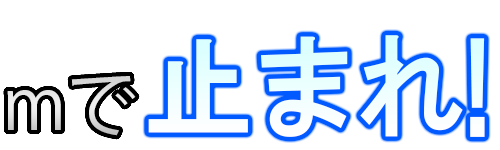
<style>
.page{position:relative;width:500px;height:150px;background:#ffffff}
.page>*{position:absolute;margin:0}
.t1{font:112.7px "HGSGothicE";color:#edffff;scale:0.95 1}
</style>
<div class="page">
<p class="t1" style="left:148px;top:35px;width:337px;height:102px">止まれ!</p>
</div>
